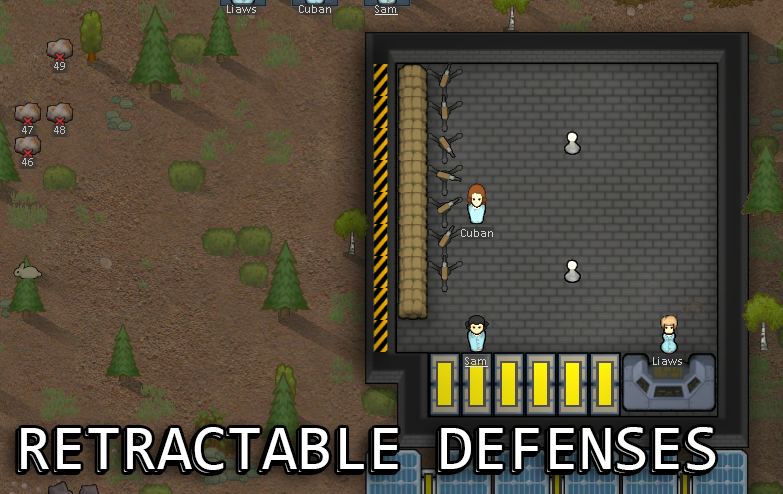
<style>
.page{position:relative;width:783px;height:494px}
.page>*{position:absolute;margin:0}
.t1{font:64px "Consolas";color:#ffffff}
</style>
<div class="page">
<p class="t1" style="left:21px;top:427px;width:695px;height:43px">RETRACTABLE DEFENSES</p>
</div>
